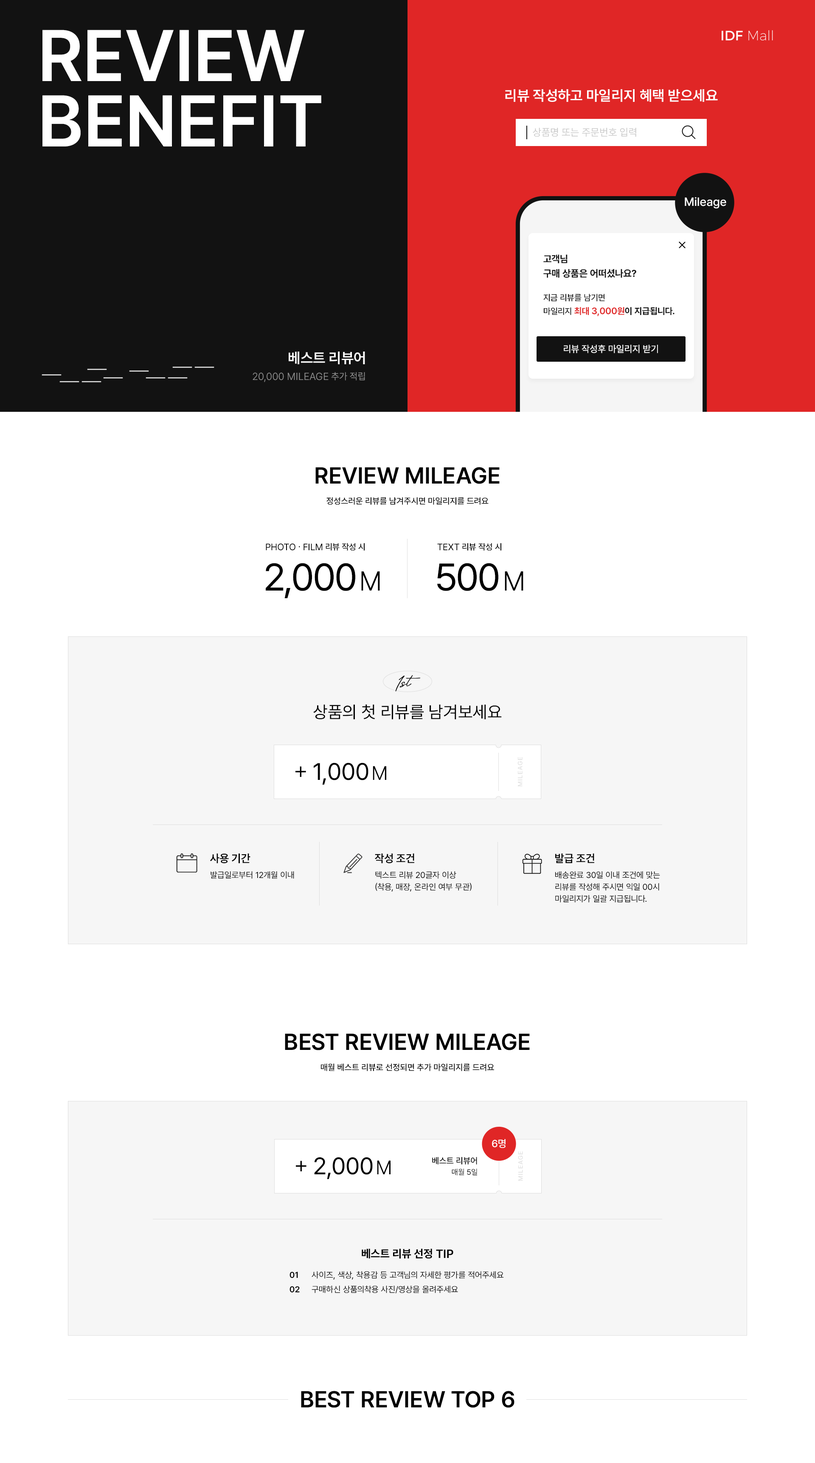
<style>
.page{position:relative;width:815px;height:1463px;background:#ffffff}
.page>*{position:absolute;margin:0}
.t1{font:72.2px/65.4px "Pretendard-SemiBold";color:#ffffff}
.t2{font:14.4px "Pretendard-SemiBold";color:#ffffff}
.t3{font:10.2px "Pretendard-Regular";color:#cacaca}
.t4{font:11.9px "Pretendard-Medium";color:#ffffff}
.t5{font:11.9px "Pretendard-Medium";color:#ffffff;text-transform:uppercase}
.t6{font:9.8px/14.4px "Pretendard-Bold";color:#121212}
.t7{font:8.5px/13.6px "Pretendard-Medium";color:#121212}
.t8{font:8.9px/13.6px "Pretendard-Bold";color:#e02626}
.t9{font:9.3px/13.6px "Pretendard-SemiBold";letter-spacing:-0.01em;color:#e02626}
.t10{font:8.9px/13.6px "Pretendard-Bold";color:#121212}
.t11{font:9.3px "Pretendard-Regular";color:#ffffff;text-transform:uppercase}
.t12{font:10.2px "Pretendard-Light";letter-spacing:0.01em;color:#919191}
.t13{font:9.3px "Pretendard-Regular";color:#919191}
.t14{font:22.9px "Pretendard-SemiBold";color:#000000;text-transform:uppercase}
.t15{font:8.5px "Pretendard-Medium";color:#000000;text-transform:uppercase}
.t16{font:9.3px "Pretendard-Regular";color:#000000;text-transform:uppercase}
.t17{font:38.2px "Pretendard-Regular";letter-spacing:-0.02em;color:#000000}
.t18{font:27.2px "Pretendard-Light";color:#000000}
.t19{font:23.8px "Thesignature";color:#000000}
.t20{font:17px "Pretendard-Regular";color:#000000;text-transform:uppercase}
.t21{font:6.4px "Pretendard-Medium";letter-spacing:0.1em;color:#e1e1e1;text-transform:uppercase}
.t22{font:23.8px "Pretendard-Light";color:#000000}
.t23{font:23.8px "Pretendard-Regular";color:#000000}
.t24{font:23.8px "Pretendard-Regular";letter-spacing:0.08em;color:#000000}
.t25{font:19.5px "Pretendard-Light";letter-spacing:0.08em;color:#000000}
.t26{font:11px "Pretendard-SemiBold";letter-spacing:-0.01em;color:#000000;text-transform:uppercase}
.t27{font:8.5px "Pretendard-Regular";color:#000000;text-transform:uppercase}
.t28{font:8.5px/11.9px "Pretendard-Regular";color:#000000;text-transform:uppercase}
.t29{font:10.2px "Pretendard-Medium";letter-spacing:-0.01em;color:#ffffff;text-transform:uppercase}
.t30{font:23.8px "Pretendard-Regular";letter-spacing:-0.01em;color:#000000}
.t31{font:8.5px/11.9px "Pretendard-Medium";color:#000000;text-transform:uppercase}
.t32{font:7.6px/11.9px "Pretendard-Regular";color:#000000;text-transform:uppercase}
.t33{font:11px "Pretendard-Bold";color:#000000;text-transform:uppercase}
.t34{font:11.9px "Pretendard-SemiBold";color:#000000;text-transform:uppercase}
.t35{font:8.5px/14.4px "Pretendard-SemiBold";color:#000000;text-transform:uppercase}
.t36{font:8.5px/14.4px "Pretendard-Regular";color:#000000;text-transform:uppercase}
</style>
<div class="page">
<p class="t1" style="left:42px;top:30px;width:279px;height:116px">REVIEW<br>BENEFIT</p>
<p class="t2" style="left:505px;top:89px;width:213px;height:13px">리뷰 작성하고 마일리지 혜택 받으세요</p>
<p class="t3" style="left:533px;top:128px;width:103px;height:9px">상품명 또는 주문번호 입력</p>
<p class="t4" style="left:685px;top:197px;width:41px;height:11px"><span class="t5">m</span>ileage</p>
<p class="t6" style="left:543px;top:254px;width:132px;height:62px">고객님<br>구매 상품은 어떠셨나요?<br>  <br><span class="t7">지금 리뷰를 남기면 <br>마일리지 </span><span class="t8">최대 </span><span class="t9">3,000</span><span class="t8">원</span><span class="t10">이 지급됩니다.</span></p>
<p class="t2" style="left:289px;top:352px;width:76px;height:12px">베스트 리뷰어</p>
<p class="t11" style="left:564px;top:345px;width:94px;height:8px">리뷰 작성후 마일리지 받기</p>
<p class="t12" style="left:253px;top:372px;width:112px;height:10px">20,000 MILEAGE <span class="t13">추가 적립</span></p>
<p class="t14" style="left:315px;top:467px;width:185px;height:17px">REVIEW MILEAGE</p>
<p class="t15" style="left:326px;top:497px;width:163px;height:8px">정성스러운 리뷰를 남겨주시면 마일리지를 드려요</p>
<p class="t16" style="left:266px;top:543px;width:99px;height:8px">photo . film<span class="t15"> 리뷰 작성 시</span></p>
<p class="t15" style="left:437px;top:543px;width:64px;height:8px"><span class="t16">text</span> 리뷰 작성 시</p>
<p class="t17" style="left:266px;top:563px;width:89px;height:35px">2,000</p>
<p class="t17" style="left:437px;top:563px;width:61px;height:28px">500</p>
<p class="t18" style="left:361px;top:571px;width:19px;height:20px">M</p>
<p class="t18" style="left:505px;top:571px;width:18px;height:20px">M</p>
<p class="t19" style="left:395px;top:675px;width:26px;height:17px">1st</p>
<p class="t20" style="left:313px;top:704px;width:189px;height:16px">상품의 첫 리뷰를 남겨보세요</p>
<p class="t21" style="left:518px;top:757px;width:5px;height:29px;rotate:-90deg">mileage</p>
<p class="t22" style="left:295px;top:766px;width:11px;height:11px">+</p>
<p class="t23" style="left:313px;top:762px;width:73px;height:23px">1,00<span class="t24">0</span><span class="t25">M</span></p>
<p class="t26" style="left:210px;top:853px;width:40px;height:10px">사용 기간</p>
<p class="t26" style="left:375px;top:853px;width:39px;height:10px">작성 조건</p>
<p class="t26" style="left:555px;top:853px;width:39px;height:10px">발급 조건</p>
<p class="t27" style="left:211px;top:871px;width:83px;height:8px">발급일로부터 12개월 이내</p>
<p class="t28" style="left:375px;top:871px;width:97px;height:21px">텍스트 리뷰 20글자 이상<br>(착용, 매장, 온라인 여부 무관)</p>
<p class="t28" style="left:555px;top:871px;width:105px;height:32px">배송완료 30일 이내 조건에 맞는 <br>리뷰를 작성해 주시면 익일 00시 <br>마일리지가 일괄 지급됩니다.</p>
<p class="t14" style="left:285px;top:1033px;width:245px;height:17px">best review MILEAGE</p>
<p class="t15" style="left:321px;top:1063px;width:173px;height:8px">매월 베스트 리뷰로 선정되면 추가 마일리지를 드려요</p>
<p class="t29" style="left:492px;top:1139px;width:14px;height:9px">6명</p>
<p class="t30" style="left:314px;top:1157px;width:77px;height:22px">2,00<span class="t24">0</span><span class="t25">M</span></p>
<p class="t31" style="left:432px;top:1157px;width:45px;height:19px;text-align:right">베스트 리뷰어<br><span class="t32">매월 5일</span></p>
<p class="t21" style="left:518px;top:1151px;width:5px;height:30px;rotate:-90deg">mileage</p>
<p class="t22" style="left:296px;top:1161px;width:11px;height:10px">+</p>
<p class="t33" style="left:362px;top:1249px;width:91px;height:10px">베스트 리뷰 선정 <span class="t34">tip</span></p>
<p class="t35" style="left:290px;top:1271px;width:10px;height:22px">01<br>02</p>
<p class="t36" style="left:312px;top:1271px;width:192px;height:23px">사이즈, 색상, 착용감 등 고객님의 자세한 평가를 적어주세요<br>구매하신 상품의착용 사진/영상을 올려주세요</p>
<p class="t14" style="left:301px;top:1391px;width:214px;height:17px">best review top 6</p>
</div>
